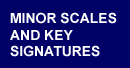
<style>
.page{position:relative;width:130px;height:68px;background:#000066}
.page>*{position:absolute;margin:0}
.t1{font:13.9px "Arial-BoldMT";color:#ffffff}
</style>
<div class="page">
<p class="t1" style="left:10px;top:12px;width:107px;height:45px">MINOR SCALES<br>AND KEY<br>SIGNATURES</p>
</div>
